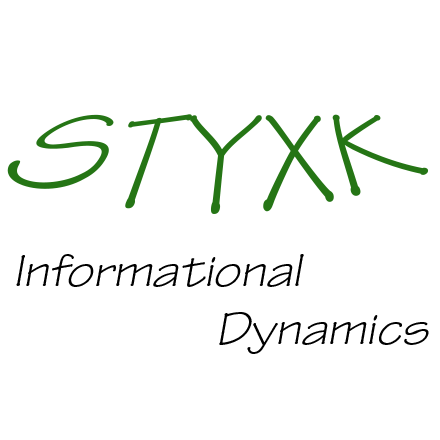
<style>
.page{position:relative;width:440px;height:440px;background:#ffffff}
.page>*{position:absolute;margin:0}
.t1{font:106.9px "TektonPro-ExtObl";color:#257515}
.t2{font:48px "TektonPro-ExtObl";color:#000000}
</style>
<div class="page">
<p class="t1" style="left:7px;top:114px;width:422px;height:100px">STYXK</p>
<p class="t2" style="left:16px;top:254px;width:413px;height:100px">Informational<br>Dynamics</p>
</div>
